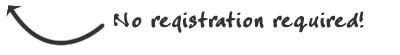
<style>
.page{position:relative;width:400px;height:55px;background:#ffffff}
.page>*{position:absolute;margin:0}
.t1{font:30px "CrappyJoe";color:#333333}
</style>
<div class="page">
<p class="t1" style="left:113px;top:11px;width:251px;height:22px">No registration required!</p>
</div>
